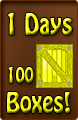
<style>
.page{position:relative;width:78px;height:120px}
.page>*{position:absolute;margin:0}
.t1{font:26.4px "HoboStd";scale:0.83 1}
.t2{font:25.2px "HoboStd";scale:0.83 1}
.t3{font:19.2px "HoboStd";scale:0.83 1}
</style>
<div class="page">
<p class="t1" style="left:8px;top:12px;width:64px;height:23px">1 Days</p>
<p class="t2" style="left:7px;top:66px;width:63px;height:47px"><span class="t3">100 <br></span>Boxes!</p>
</div>
